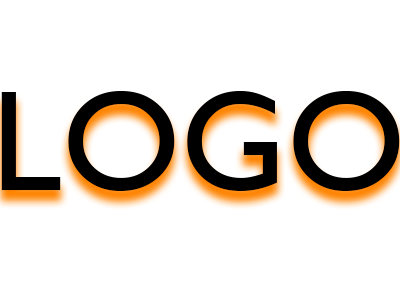
<style>
.page{position:relative;width:400px;height:300px;background:#ffffff}
.page>*{position:absolute;margin:0}
.t1{font:144px "GillSans";color:#000000}
</style>
<div class="page">
<p class="t1" style="left:1px;top:91px;width:399px;height:100px">LOGO</p>
</div>
